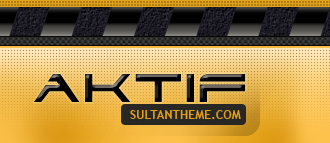
<style>
.page{position:relative;width:330px;height:143px}
.page>*{position:absolute;margin:0}
.t1{font:48px "Dodger";letter-spacing:0.01em;color:#020109}
.t2{font:12px "TrebuchetMS-Bold";letter-spacing:0.01em;color:#e19f1d}
</style>
<div class="page">
<p class="t1" style="left:34px;top:74px;width:211px;height:28px">AKTIF</p>
<p class="t2" style="left:130px;top:110px;width:111px;height:9px">SULTANTHEME.COM</p>
</div>
